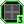
<style>
.page{position:relative;width:24px;height:24px;background:#4b4b4b}
.page>*{position:absolute;margin:0}
.t1{font:9px "Montserrat-Bold";color:#000000}
</style>
<div class="page">
<p class="t1" style="left:18px;top:16px;width:5px;height:7px">3</p>
</div>
